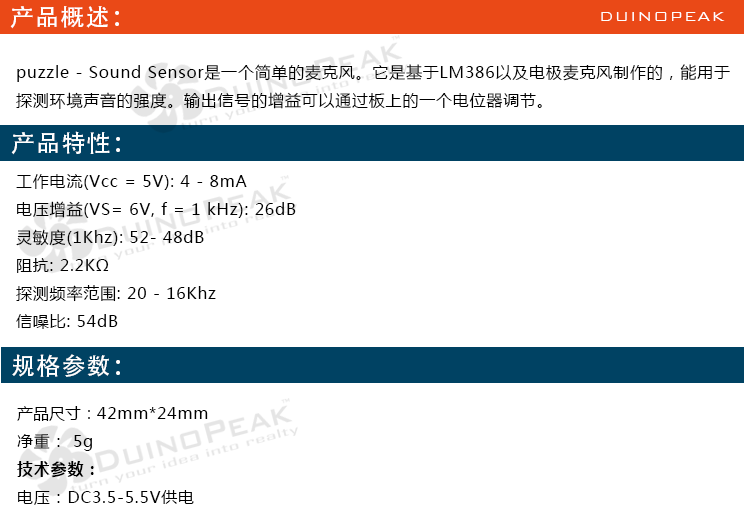
<style>
.page{position:relative;width:744px;height:510px;background:#ffffff}
.page>*{position:absolute;margin:0}
.t1{font:24px "AdobeHeitiStd-Regular";letter-spacing:0.05em;color:#ffffff}
.t2{font:18px "BankGothicBT-Light";letter-spacing:0.05em;color:#ffffff}
.t3{font:16px "MicrosoftYaHei";letter-spacing:0.05em;color:#000000}
.t4{font:16px "MicrosoftYaHei";color:#000000}
.t5{font:16px "MicrosoftYaHei-Bold";letter-spacing:0.05em;color:#000000}
</style>
<div class="page">
<p class="t1" style="left:10px;top:6px;width:109px;height:23px">产品概述：</p>
<p class="t2" style="left:601px;top:12px;width:124px;height:9px">DUINOPEAK</p>
<p class="t3" style="left:16px;top:64px;width:714px;height:45px">puzzle - Sound Sensor是一个简单的麦克风。它是基于LM386以及电极麦克风制作的，能用于<br>探测环境声音的强度。输出信号的增益可以通过板上的一个电位器调节。</p>
<p class="t1" style="left:11px;top:131px;width:109px;height:24px">产品特性：</p>
<p class="t3" style="left:16px;top:174px;width:280px;height:155px">工作电流(Vcc = 5V): 4 - 8mA <br>电压增益(VS= 6V, f = 1 kHz): 26dB <br>灵敏度(1Khz): 52- 48dB <br>阻抗: 2.2KΩ <br>探测频率范围: 20 - 16Khz <br>信噪比: 54dB</p>
<p class="t1" style="left:12px;top:354px;width:108px;height:23px">规格参数：</p>
<p class="t3" style="left:17px;top:406px;width:191px;height:99px"><span class="t4">产品尺寸：</span>42mm*24mm<br>净重： 5g<br><span class="t5">技术参数：<br></span>电压：DC3.5-5.5V供电</p>
</div>
